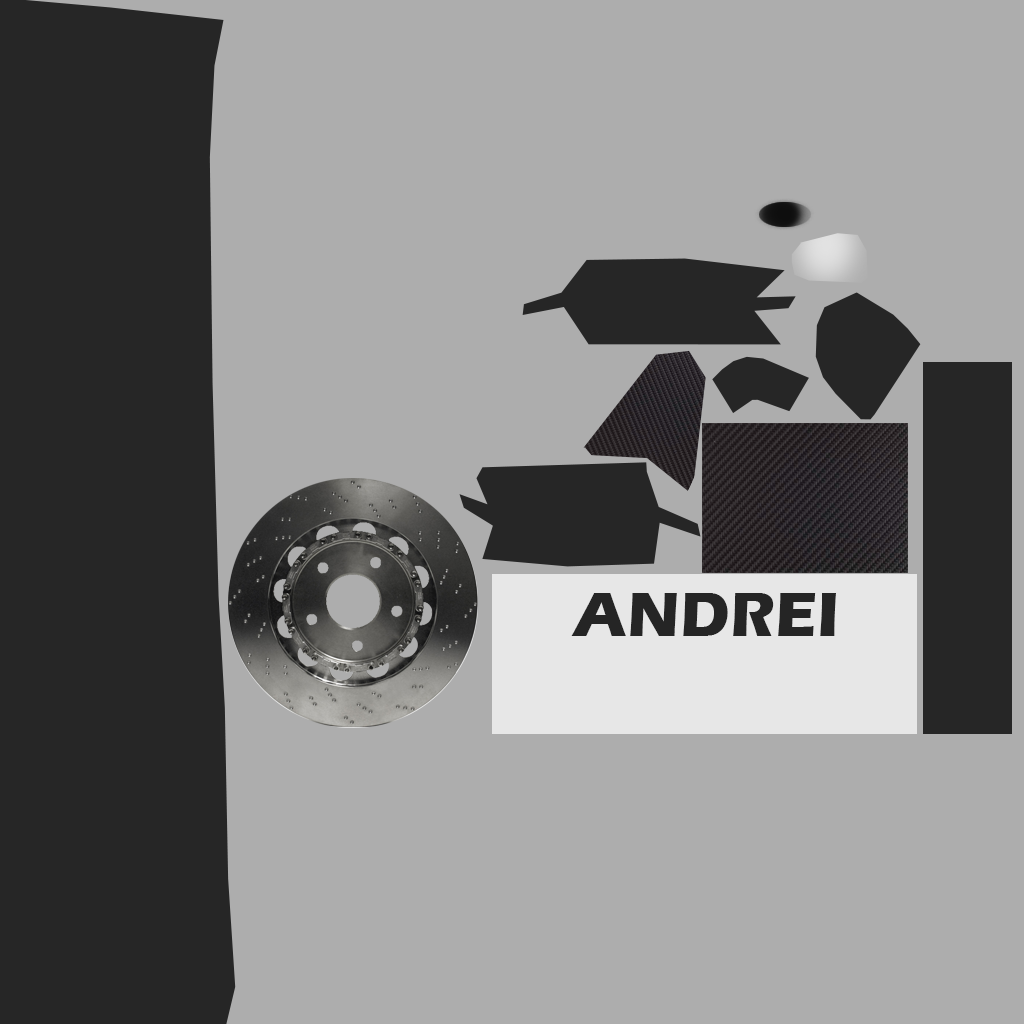
<style>
.page{position:relative;width:1024px;height:1024px;background:#adadad}
.page>*{position:absolute;margin:0}
.t1{font:64.5px "ErasITC-Bold";color:#252525}
</style>
<div class="page">
<p class="t1" style="left:571px;top:593px;width:265px;height:43px">ANDREI</p>
</div>
